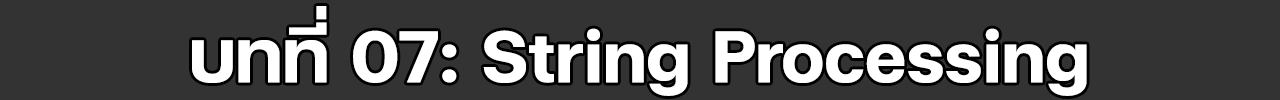
<style>
.page{position:relative;width:1280px;height:100px;background:#333333}
.page>*{position:absolute;margin:0}
.t1{font:100px "FCMinimalBold";color:#ffffff}
</style>
<div class="page">
<p class="t1" style="left:192px;top:6px;width:895px;height:90px">บทที่ 07: String Processing</p>
</div>
